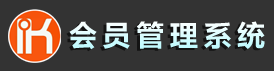
<style>
.page{position:relative;width:274px;height:71px;background:#333333}
.page>*{position:absolute;margin:0}
.t1{font:28px "MicrosoftYaHei";letter-spacing:0.2em}
</style>
<div class="page">
<p class="t1" style="left:69px;top:21px;width:196px;height:29px">会员管理系统</p>
</div>
